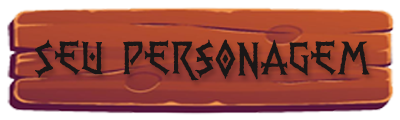
<style>
.page{position:relative;width:400px;height:120px}
.page>*{position:absolute;margin:0}
.t1{font:50px "PRViking";color:#1a1717}
</style>
<div class="page">
<p class="t1" style="left:35px;top:39px;width:335px;height:42px">Seu Personagem</p>
</div>
